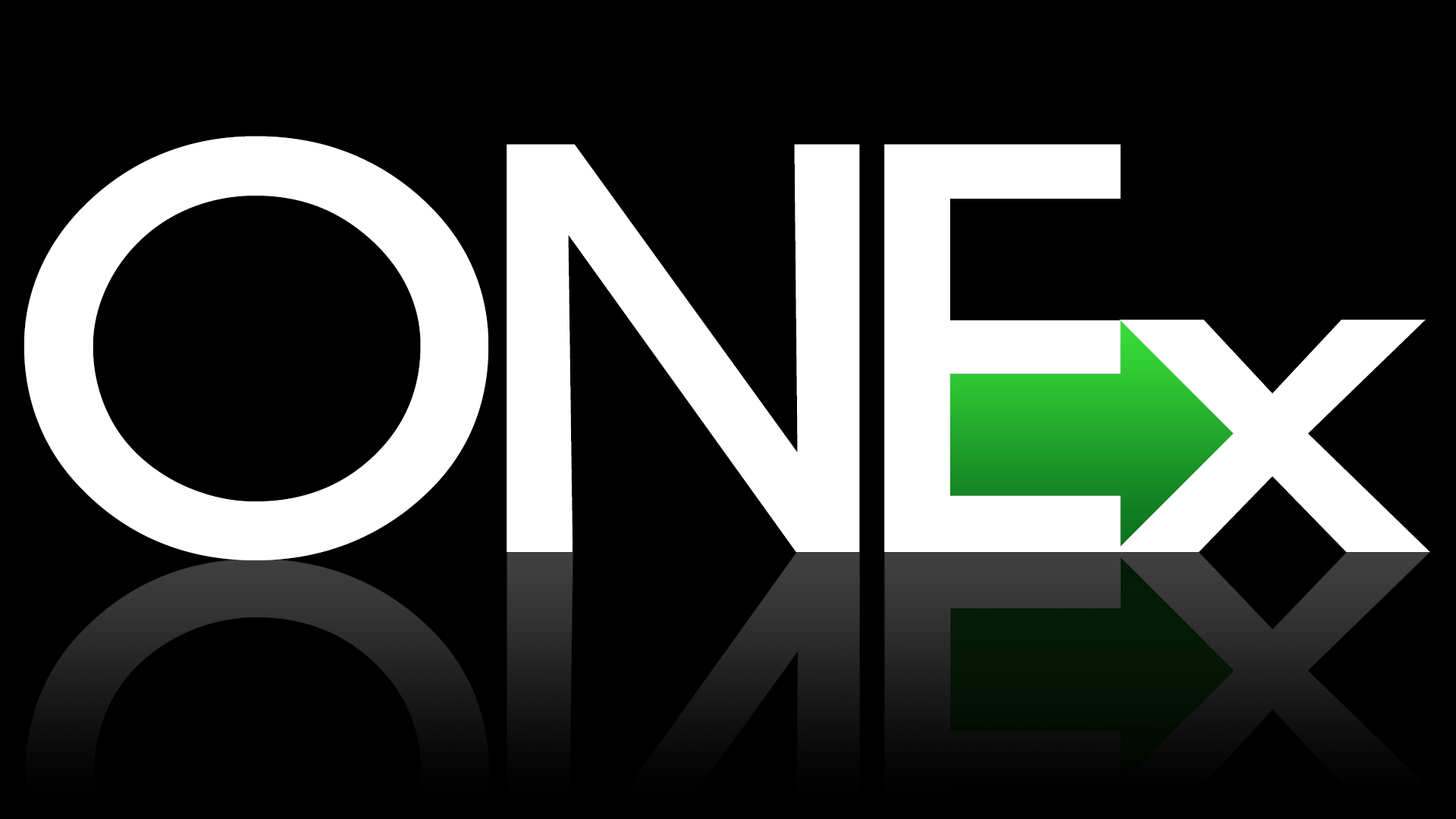
<style>
.page{position:relative;width:1456px;height:819px;background:#000000}
.page>*{position:absolute;margin:0}
.t1{font:573.4px "AvantGardeITCbyBT-Medium";letter-spacing:-0.085em;color:#ffffff;scale:1.11 1}
.t2{font:573.4px "AvantGardeITCbyBT-Medium";letter-spacing:-0.065em;color:#ffffff;scale:1.11 1}
.t3{font:458.1px "DINMittelschriftLT";letter-spacing:0.075em;color:#ffffff;scale:1.54 1}
</style>
<div class="page">
<p class="t1" style="left:24px;top:136px;width:1097px;height:424px"><span class="t2">O</span>NE</p>
<p class="t3" style="left:1115px;top:319px;width:315px;height:233px">x</p>
</div>
